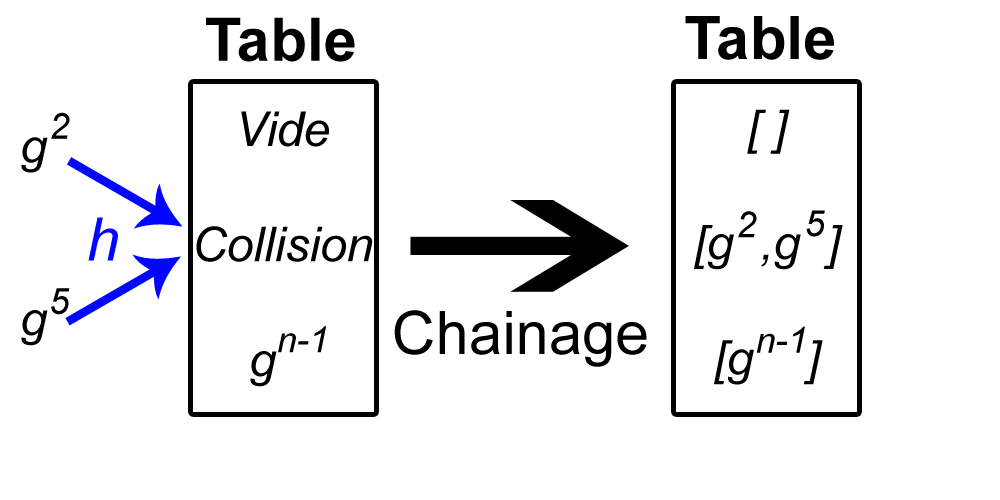
<style>
.page{position:relative;width:1000px;height:500px;background:#ffffff}
.page>*{position:absolute;margin:0}
.t1{font:60px "Arial-BoldMT";color:#000000}
.t2{font:36px "Arial-ItalicMT";color:#000000}
.t3{font:48px "Arial-ItalicMT";color:#000000}
.t4{font:60px "Arial-ItalicMT";color:#0006ff}
.t5{font:60px "ArialMT";color:#000000}
</style>
<div class="page">
<p class="t1" style="left:206px;top:17px;width:149px;height:45px">Table</p>
<p class="t1" style="left:685px;top:16px;width:149px;height:44px">Table</p>
<p class="t2" style="left:51px;top:112px;width:19px;height:27px">2</p>
<p class="t3" style="left:196px;top:111px;width:177px;height:276px;text-align:center">Vide<br><br>Collision<br><br>g</p>
<p class="t3" style="left:694px;top:109px;width:149px;height:276px;text-align:center">[ ]<br><br>[g  ,g  ]<br><br>[g    ]</p>
<p class="t3" style="left:21px;top:137px;width:27px;height:209px">g<br><br><br>g</p>
<p class="t4" style="left:88px;top:217px;width:30px;height:44px">h</p>
<p class="t2" style="left:738px;top:211px;width:19px;height:27px">2</p>
<p class="t2" style="left:806px;top:210px;width:19px;height:27px">5</p>
<p class="t2" style="left:51px;top:288px;width:19px;height:27px">5</p>
<p class="t5" style="left:394px;top:310px;width:253px;height:57px">Chainage</p>
<p class="t2" style="left:278px;top:326px;width:49px;height:27px">n-1</p>
<p class="t2" style="left:756px;top:326px;width:49px;height:27px">n-1</p>
</div>
